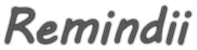
<style>
.page{position:relative;width:197px;height:50px;background:#ffffff}
.page>*{position:absolute;margin:0}
.t1{font:48px "MVBoli";color:#595959}
</style>
<div class="page">
<p class="t1" style="left:5px;top:6px;width:186px;height:39px">Remindii</p>
</div>
